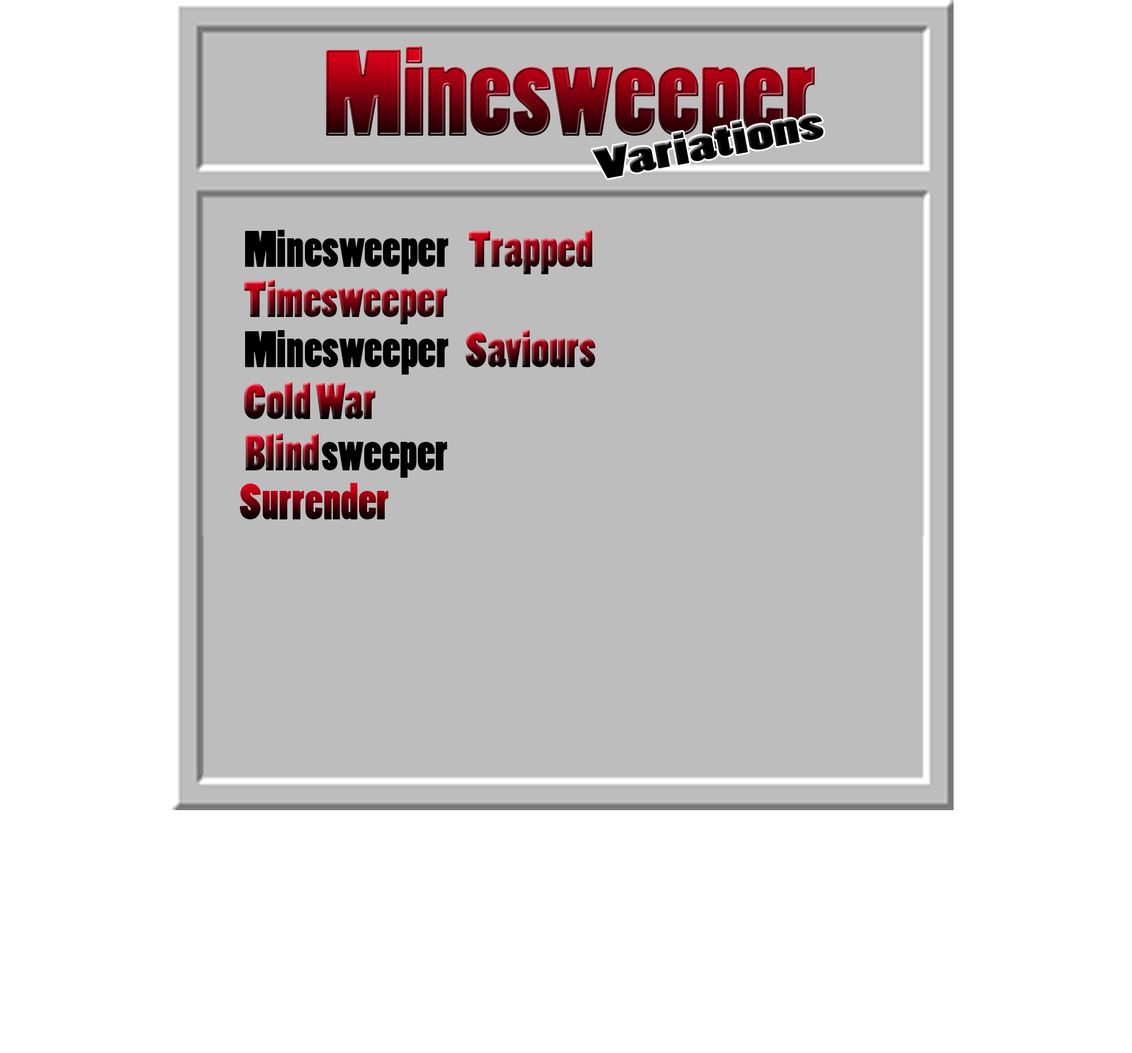
<style>
.page{position:relative;width:1132px;height:1053px;background:#ffffff}
.page>*{position:absolute;margin:0}
.t1{font:114.6px "PoplarStd"}
.t2{font:41.1px "PoplarStd";color:#000000;scale:1.72 1}
.t3{font:47.7px "PoplarStd";color:#000000}
.t4{font:47.7px "PoplarStd"}
</style>
<div class="page">
<p class="t1" style="left:326px;top:46px;width:489px;height:107px">Minesweeper</p>
<p class="t2" style="left:592px;top:115px;width:232px;height:63px;rotate:-11deg">Variations</p>
<p class="t3" style="left:245px;top:230px;width:204px;height:44px">Minesweeper</p>
<p class="t4" style="left:469px;top:230px;width:123px;height:44px">Trapped</p>
<p class="t4" style="left:244px;top:280px;width:204px;height:44px">Timesweeper</p>
<p class="t3" style="left:245px;top:330px;width:204px;height:45px">Minesweeper</p>
<p class="t4" style="left:465px;top:330px;width:131px;height:37px">Saviours</p>
<p class="t4" style="left:244px;top:383px;width:132px;height:36px">Cold War</p>
<p class="t4" style="left:246px;top:433px;width:73px;height:37px">Blind</p>
<p class="t3" style="left:322px;top:442px;width:126px;height:36px">sweeper</p>
<p class="t4" style="left:239px;top:483px;width:150px;height:36px">Surrender</p>
</div>
